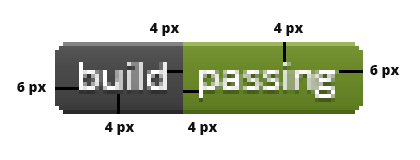
<style>
.page{position:relative;width:420px;height:160px;background:#ffffff}
.page>*{position:absolute;margin:0}
.t1{font:14px "OpenSans-Extrabold";color:#111111}
</style>
<div class="page">
<p class="t1" style="left:150px;top:23px;width:30px;height:13px">4 px</p>
<p class="t1" style="left:274px;top:23px;width:30px;height:13px">4 px</p>
<p class="t1" style="left:370px;top:65px;width:30px;height:13px">6 px</p>
<p class="t1" style="left:17px;top:82px;width:30px;height:13px">6 px</p>
<p class="t1" style="left:105px;top:122px;width:30px;height:13px">4 px</p>
<p class="t1" style="left:188px;top:122px;width:30px;height:13px">4 px</p>
</div>
